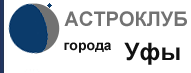
<style>
.page{position:relative;width:191px;height:73px;background:#ffffff}
.page>*{position:absolute;margin:0}
.t1{font:20px "Arial-BoldMT";color:#727272}
.t2{font:14px "Arial-BoldMT";color:#111111}
.t3{font:24px "Arial-BoldMT";color:#111111}
</style>
<div class="page">
<p class="t1" style="left:64px;top:11px;width:123px;height:16px">АСТРОКЛУБ</p>
<p class="t2" style="left:64px;top:42px;width:47px;height:11px">города</p>
<p class="t3" style="left:124px;top:42px;width:56px;height:23px">Уфы</p>
</div>
